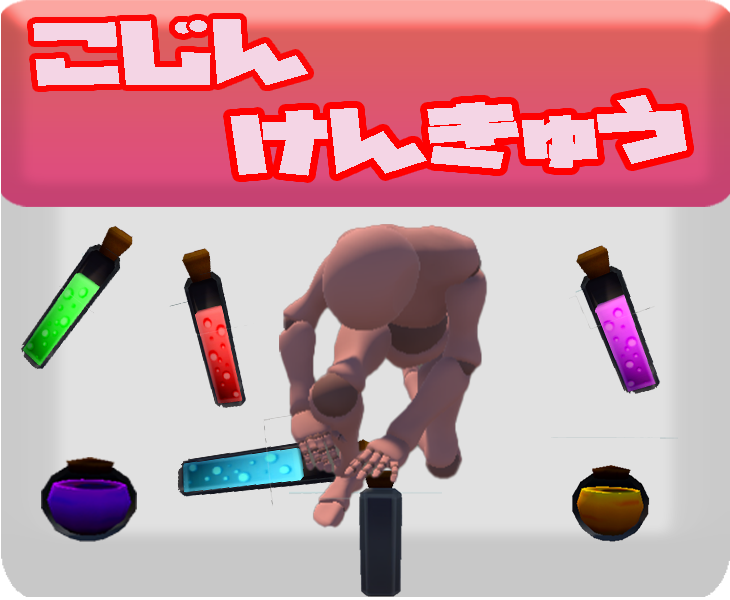
<style>
.page{position:relative;width:730px;height:600px;background:#e1e1e1}
.page>*{position:absolute;margin:0}
.t1{font:72px "GN-KMBFont-UB-NewstyleKanaA";color:#f4d5e5;scale:1.49 1}
</style>
<div class="page">
<p class="t1" style="left:33px;top:19px;width:275px;height:67px;rotate:-1deg">こじん</p>
<p class="t1" style="left:230px;top:95px;width:457px;height:81px;rotate:-2deg">けんきゅう</p>
</div>
